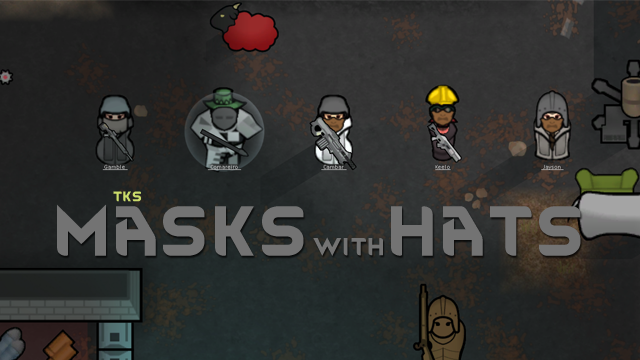
<style>
.page{position:relative;width:640px;height:360px}
.page>*{position:absolute;margin:0}
.t1{font:12px "RimWordFont";color:#cadb6a}
.t2{font:60px "RimWordFont";color:#737373}
.t3{font:36px "RimWordFont";color:#737373}
.t4{font:36px "RimWordFont";letter-spacing:0.16em;color:#737373}
</style>
<div class="page">
<p class="t1" style="left:113px;top:191px;width:28px;height:11px">tks</p>
<p class="t2" style="left:57px;top:204px;width:524px;height:52px">Masks<span class="t3">wit</span><span class="t4">h</span>Hats</p>
</div>
